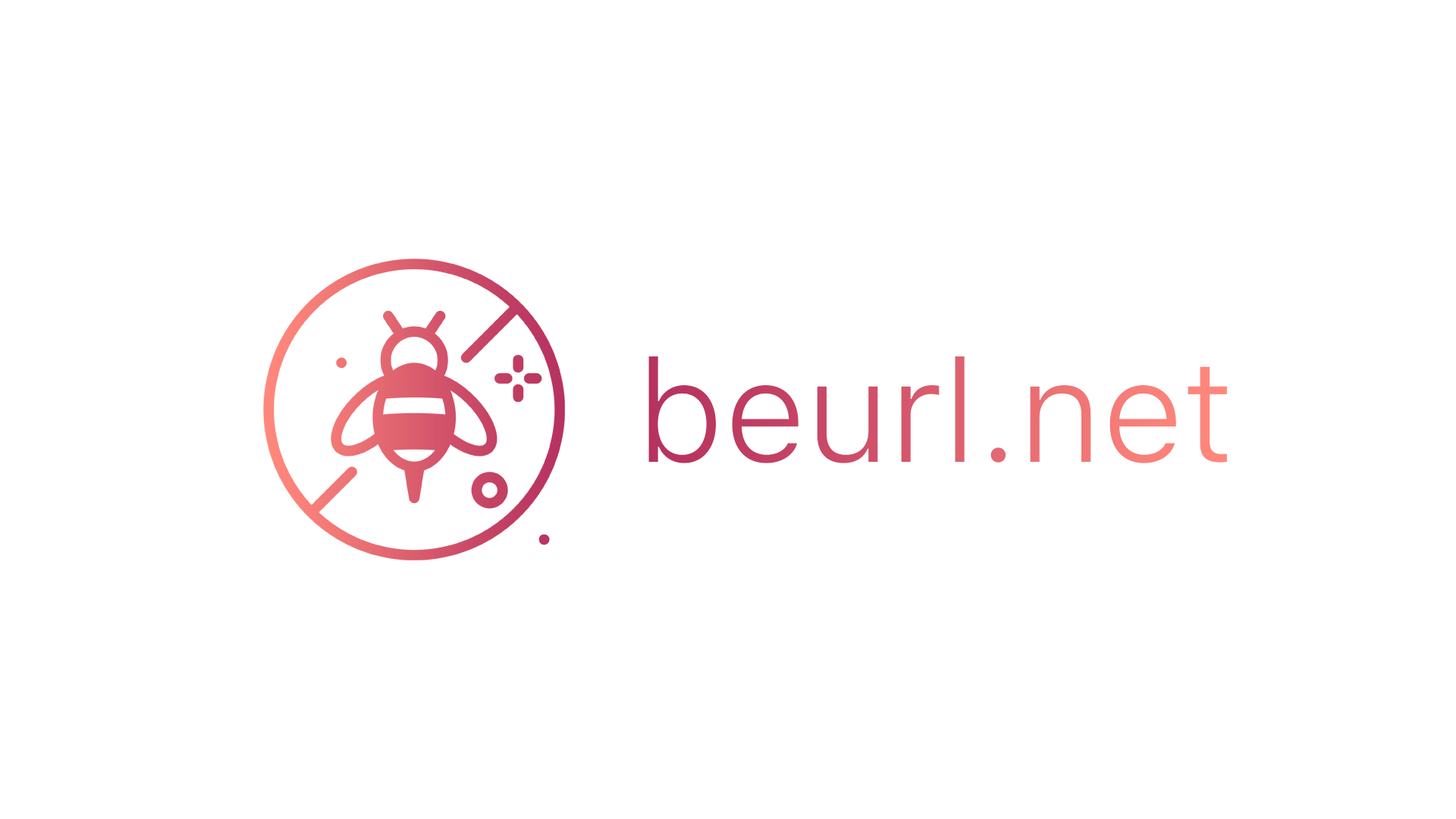
<style>
.page{position:relative;width:1456px;height:819px;background:#ffffff}
.page>*{position:absolute;margin:0}
.t1{font:143.3px "SFProText-Light"}
</style>
<div class="page">
<p class="t1" style="left:648px;top:356px;width:579px;height:107px">beurl.net</p>
</div>
